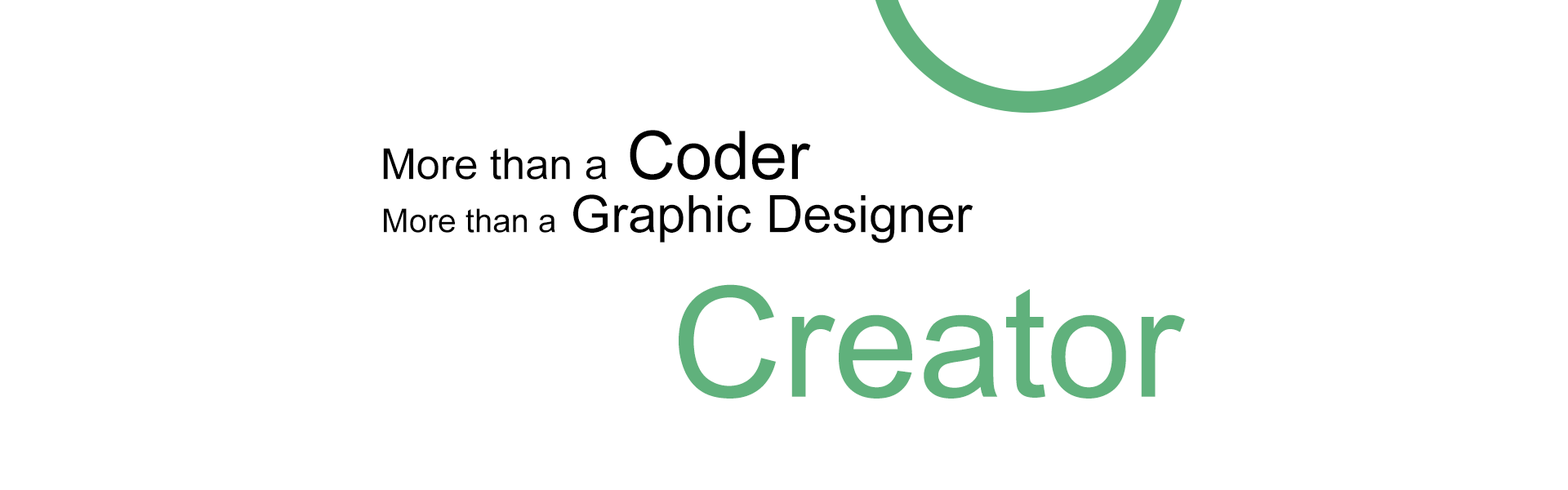
<style>
.page{position:relative;width:1568px;height:490px;background:#ffffff}
.page>*{position:absolute;margin:0}
.t1{font:42.6px "ArialMT";color:#000000}
.t2{font:67.1px "ArialMT";color:#000000}
.t3{font:51.6px "ArialMT";color:#000000}
.t4{font:32.7px "ArialMT";color:#000000}
.t5{font:153.4px "ArialMT";color:#60b17c}
</style>
<div class="page">
<p class="t1" style="left:383px;top:130px;width:428px;height:50px">More than a<span class="t2"> Coder</span></p>
<p class="t3" style="left:384px;top:194px;width:589px;height:49px"><span class="t4">More than a</span> Graphic Designer</p>
<p class="t5" style="left:679px;top:284px;width:506px;height:115px">Creator</p>
</div>
